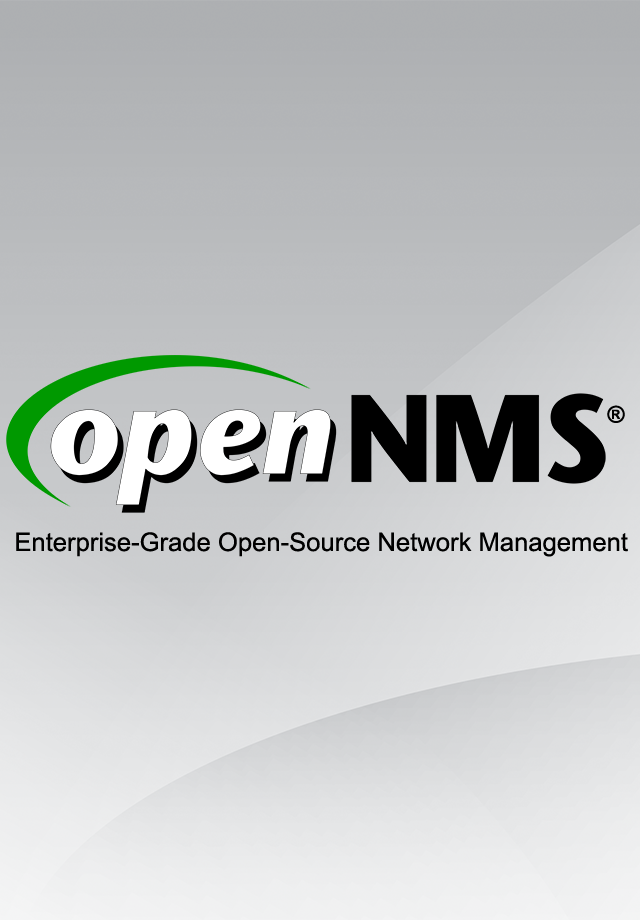
<style>
.page{position:relative;width:640px;height:920px}
.page>*{position:absolute;margin:0}
.t1{font:23px "Arial-BoldMT";color:#000000}
.t2{font:25.6px "ArialMT";color:#000000}
</style>
<div class="page">
<p class="t1" style="left:607px;top:405px;width:18px;height:18px">®</p>
<p class="t2" style="left:16px;top:532px;width:612px;height:25px">Enterprise-Grade Open-Source Network Management</p>
</div>
